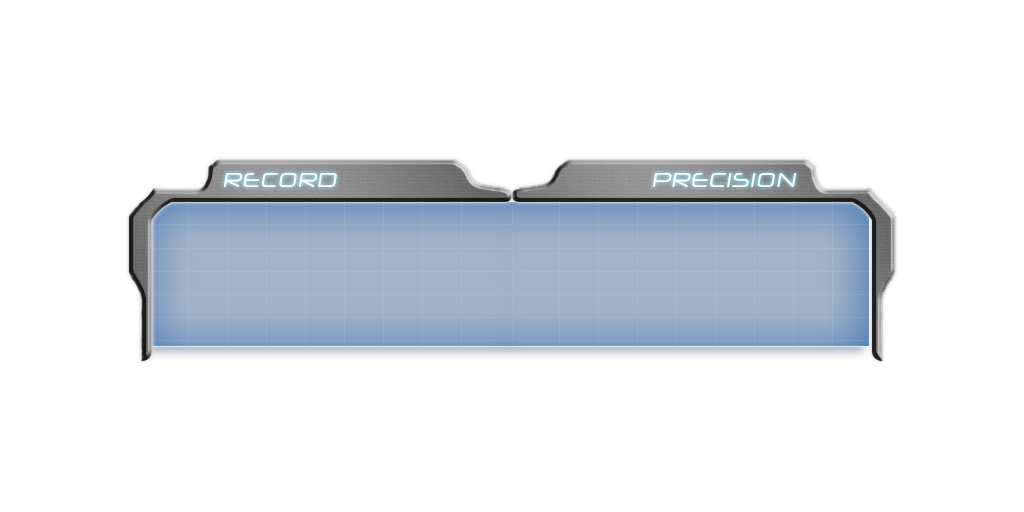
<style>
.page{position:relative;width:1024px;height:512px;background:#ffffff}
.page>*{position:absolute;margin:0}
.t1{font:20px "NeuropolXFree";color:#ffffff;font-style:italic}
</style>
<div class="page">
<p class="t1" style="left:224px;top:173px;width:113px;height:14px">RECORD</p>
<p class="t1" style="left:653px;top:173px;width:143px;height:14px">PRECISION</p>
</div>
